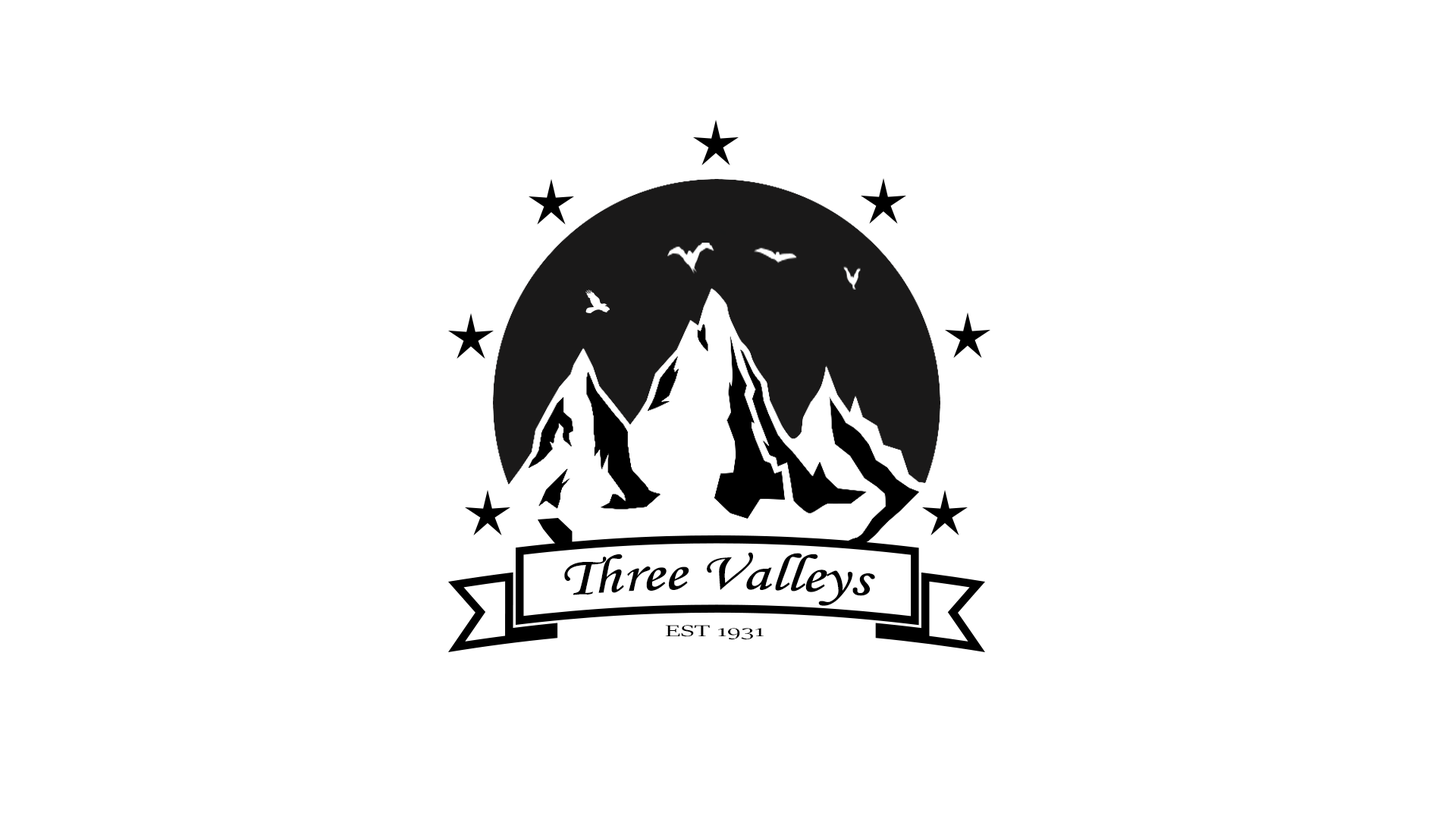
<style>
.page{position:relative;width:1456px;height:819px;background:#ffffff}
.page>*{position:absolute;margin:0}
.t1{font:53.7px "MonotypeCorsiva";color:#000000;scale:1.2 1}
.t2{font:17.8px "SitkaBanner";color:#000000;scale:1.64 1}
</style>
<div class="page">
<p class="t1" style="left:564px;top:552px;width:311px;height:54px">Three Valleys</p>
<p class="t2" style="left:665px;top:625px;width:99px;height:15px">EST 1931</p>
</div>
